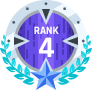
<style>
.page{position:relative;width:92px;height:90px;background:#ffffff}
.page>*{position:absolute;margin:0}
.t1{font:11px "Rajdhani-Bold";color:#ffffff}
.t2{font:30px "Rajdhani-Bold";color:#ffffff}
</style>
<div class="page">
<p class="t1" style="left:34px;top:26px;width:25px;height:8px">RANK</p>
<p class="t2" style="left:39px;top:37px;width:15px;height:20px">4</p>
</div>
